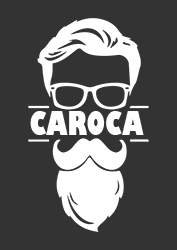
<style>
.page{position:relative;width:177px;height:250px;background:#333333}
.page>*{position:absolute;margin:0}
.t1{font:32px "GillSans-UltraBoldCondensed";color:#ffffff}
</style>
<div class="page">
<p class="t1" style="left:30px;top:111px;width:114px;height:24px">CAROCA</p>
</div>
